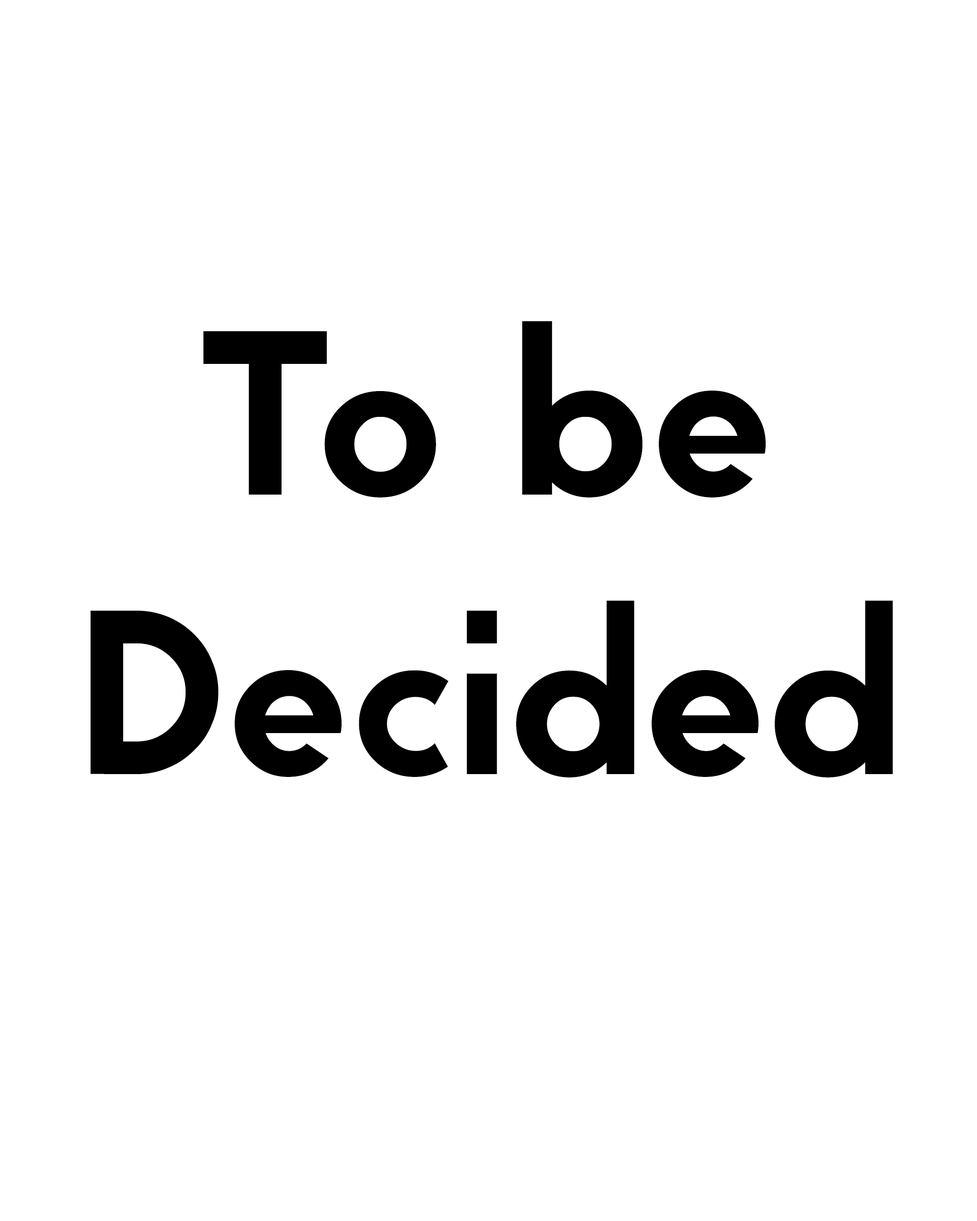
<style>
.page{position:relative;width:977px;height:1221px;background:#ffffff}
.page>*{position:absolute;margin:0}
.t1{font:233.1px "JaapokkisubtractRegular";color:#000000}
</style>
<div class="page">
<p class="t1" style="left:90px;top:321px;width:803px;height:456px">To be<br>Decided</p>
</div>
